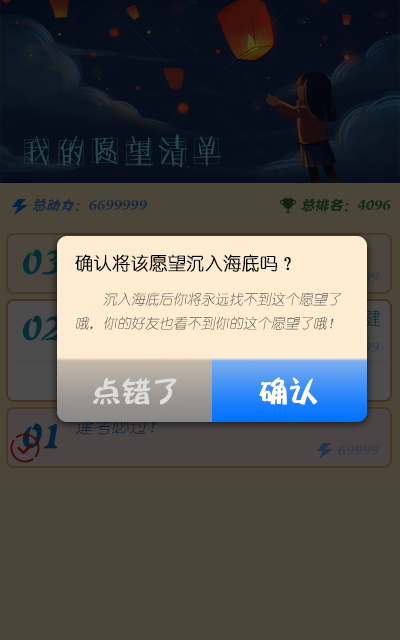
<style>
.page{position:relative;width:400px;height:640px;background:#4c4639}
.page>*{position:absolute;margin:0}
.t1{font:34px "FZNHT";color:#26454c}
.t2{font:14px "FZJZJW--GB1-0";color:#1a2a41;font-style:italic}
.t3{font:14px "FZJZJW--GB1-0";color:#11290d;font-style:italic}
.t4{font:34px "FZJZJW--GB1-0";color:#052e37;font-style:italic}
.t5{font:14px/24px "YouYuan";color:#585858;font-style:italic}
.t6{font:18px/24px "YouYuan";color:#000000;font-weight:bold}
.t7{font:30px "DFPBuDingW12";color:#dddddd}
.t8{font:30px "DFPBuDingW12";color:#ffffff}
.t9{font:34px "FZJZJW--GB1-0";color:#052237;font-style:italic}
.t10{font:18px "YouYuan";font-style:italic}
.t11{font:14px "FZJZJW--GB1-0";color:#343d4b;font-style:italic}
</style>
<div class="page">
<p class="t1" style="left:24px;top:134px;width:197px;height:34px">我的愿望清单</p>
<p class="t2" style="left:32px;top:198px;width:115px;height:14px">总动力：6699999</p>
<p class="t3" style="left:301px;top:198px;width:90px;height:14px">总排名：4096</p>
<p class="t4" style="left:23px;top:249px;width:38px;height:26px">03</p>
<p class="t5" style="left:75px;top:254px;width:267px;height:77px"><span class="t6">确认将该愿望沉入海底吗？<br><br></span>    沉入海底后你将永远找不到这个愿望了哦，你的好友也看不到你的这个愿望了哦！</p>
<p class="t7" style="left:93px;top:377px;width:84px;height:28px">点错了</p>
<p class="t8" style="left:259px;top:377px;width:59px;height:28px">确认</p>
<p class="t9" style="left:23px;top:423px;width:35px;height:26px">01</p>
<p class="t10" style="left:75px;top:417px;width:80px;height:18px">逢考必过！</p>
<p class="t11" style="left:338px;top:445px;width:42px;height:11px">69999</p>
</div>
